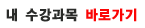
<style>
.page{position:relative;width:145px;height:28px;background:#ffffff}
.page>*{position:absolute;margin:0}
.t1{font:14.3px "YDIYGO150-KSCPC-EUC-H";letter-spacing:-0.01em;color:#2a2b29;font-weight:bold;scale:0.91 1}
.t2{font:14.3px "YDIYGO150-KSCPC-EUC-H";letter-spacing:-0.01em;color:#fb0505;font-weight:bold;scale:0.91 1}
</style>
<div class="page">
<p class="t1" style="left:6px;top:8px;width:131px;height:14px">내 수강과목 <span class="t2">바로가기</span></p>
</div>
